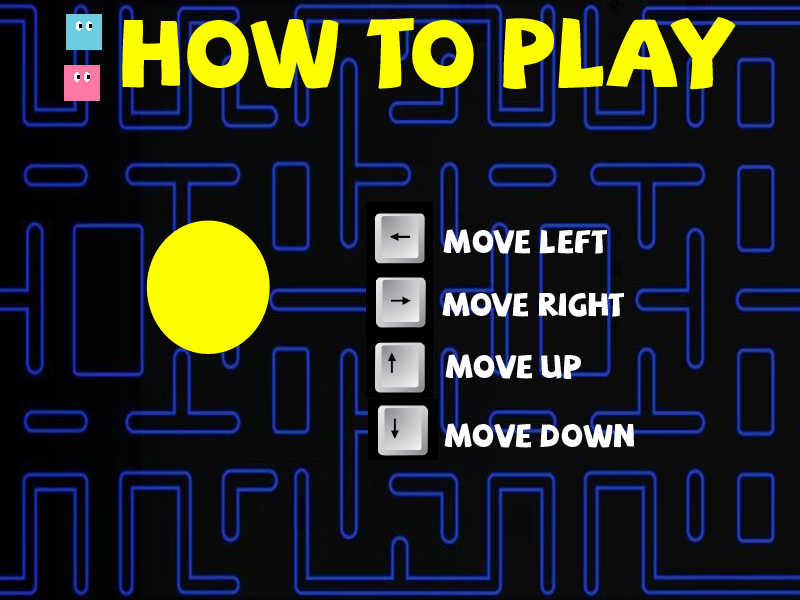
<style>
.page{position:relative;width:800px;height:600px}
.page>*{position:absolute;margin:0}
.t1{font:32px "SAF";color:#ffffff}
</style>
<div class="page">
<p class="t1" style="left:443px;top:229px;width:164px;height:25px">mOVE LEFT</p>
<p class="t1" style="left:442px;top:292px;width:182px;height:25px">MOVE RIGHT</p>
<p class="t1" style="left:445px;top:354px;width:136px;height:25px">MOVE UP</p>
<p class="t1" style="left:444px;top:423px;width:190px;height:25px">MOVE DOWN</p>
</div>
